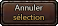
<style>
.page{position:relative;width:58px;height:26px}
.page>*{position:absolute;margin:0}
.t1{font:8px "LaoUI"}
</style>
<div class="page">
<p class="t1" style="left:13px;top:4px;width:31px;height:16px;text-align:center">Annuler<br>sélection</p>
</div>
